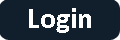
<style>
.page{position:relative;width:120px;height:40px;background:#111e2b}
.page>*{position:absolute;margin:0}
.t1{font:30px "Calibri-Bold";color:#ffffff}
</style>
<div class="page">
<p class="t1" style="left:29px;top:8px;width:62px;height:25px">Login</p>
</div>
